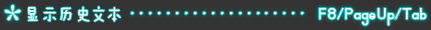
<style>
.page{position:relative;width:431px;height:30px;background:#333333}
.page>*{position:absolute;margin:0}
.t1{font:18px "¢è?";color:#ffffff}
</style>
<div class="page">
<p class="t1" style="left:28px;top:6px;width:93px;height:16px">显示历史文本</p>
</div>
